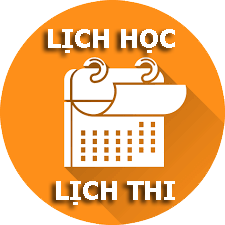
<style>
.page{position:relative;width:225px;height:225px;background:#ffffff}
.page>*{position:absolute;margin:0}
.t1{font:26px "Tahoma-Bold";color:#ffffff}
</style>
<div class="page">
<p class="t1" style="left:48px;top:29px;width:127px;height:24px">LỊCH HỌC</p>
<p class="t1" style="left:56px;top:181px;width:119px;height:24px">LỊCH THI</p>
</div>
